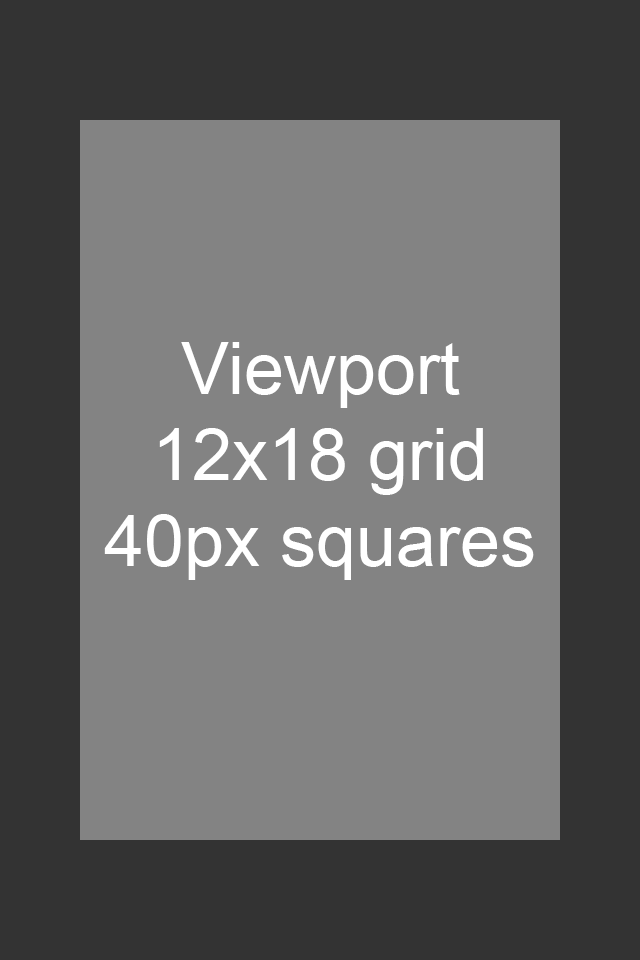
<style>
.page{position:relative;width:640px;height:960px;background:#838383}
.page>*{position:absolute;margin:0}
.t1{font:72px "ArialMT";color:#ffffff}
</style>
<div class="page">
<p class="t1" style="left:104px;top:342px;width:430px;height:238px;text-align:center">Viewport<br>12x18 grid<br>40px squares</p>
</div>
